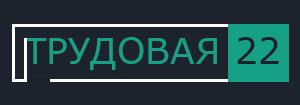
<style>
.page{position:relative;width:300px;height:105px;background:#1c232d}
.page>*{position:absolute;margin:0}
.t1{font:36px "Verdana";color:#16a085}
.t2{font:36px "Verdana";color:#19202a}
</style>
<div class="page">
<p class="t1" style="left:24px;top:37px;width:193px;height:33px">ТРУДОВАЯ</p>
<p class="t2" style="left:237px;top:37px;width:42px;height:27px">22</p>
</div>
